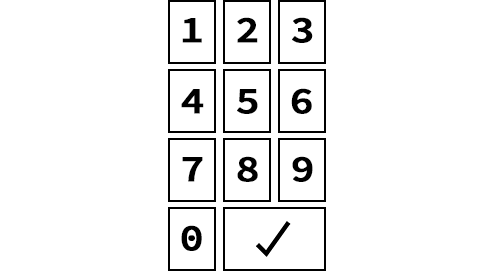
<style>
.page{position:relative;width:480px;height:280px;background:#ffffff}
.page>*{position:absolute;margin:0}
.t1{font:37.5px "SourceCodePro-Semibold";color:#000000;font-weight:bold;scale:1.07 1}
</style>
<div class="page">
<p class="t1" style="left:237px;top:17px;width:21px;height:26px">2</p>
<p class="t1" style="left:292px;top:17px;width:21px;height:26px">3</p>
<p class="t1" style="left:182px;top:18px;width:20px;height:25px">1</p>
<p class="t1" style="left:181px;top:89px;width:23px;height:25px">4</p>
<p class="t1" style="left:237px;top:89px;width:21px;height:25px">5</p>
<p class="t1" style="left:291px;top:88px;width:21px;height:26px">6</p>
<p class="t1" style="left:182px;top:157px;width:21px;height:25px">7</p>
<p class="t1" style="left:237px;top:156px;width:21px;height:26px">8</p>
<p class="t1" style="left:292px;top:156px;width:21px;height:26px">9</p>
<p class="t1" style="left:181px;top:225px;width:21px;height:26px">0</p>
</div>
